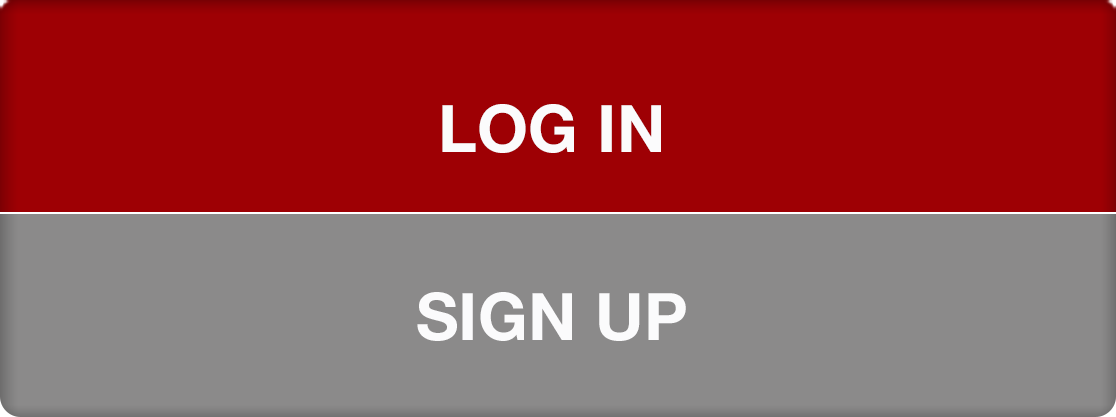
<style>
.page{position:relative;width:1116px;height:417px;background:#9e0004}
.page>*{position:absolute;margin:0}
.t1{font:65.4px "HelveticaNeue-Bold";letter-spacing:0.005em;color:#fbfbfc}
</style>
<div class="page">
<p class="t1" style="left:442px;top:104px;width:219px;height:49px">LOG IN</p>
<p class="t1" style="left:417px;top:292px;width:269px;height:49px">SIGN UP</p>
</div>
